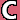
<style>
.page{position:relative;width:20px;height:20px;background:#d96275}
.page>*{position:absolute;margin:0}
.t1{font:24.7px "Gadugi-Bold";color:#ffffff}
</style>
<div class="page">
<p class="t1" style="left:2px;top:1px;width:14px;height:18px">C</p>
</div>
